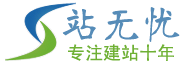
<style>
.page{position:relative;width:180px;height:65px;background:#ffffff}
.page>*{position:absolute;margin:0}
.t1{font:40px "HYh4gj";color:#568cb8}
.t2{font:18px "SimHei";color:#6eb034}
</style>
<div class="page">
<p class="t1" style="left:62px;top:7px;width:118px;height:35px">站无忧</p>
<p class="t2" style="left:68px;top:44px;width:106px;height:17px">专注建站十年</p>
</div>
